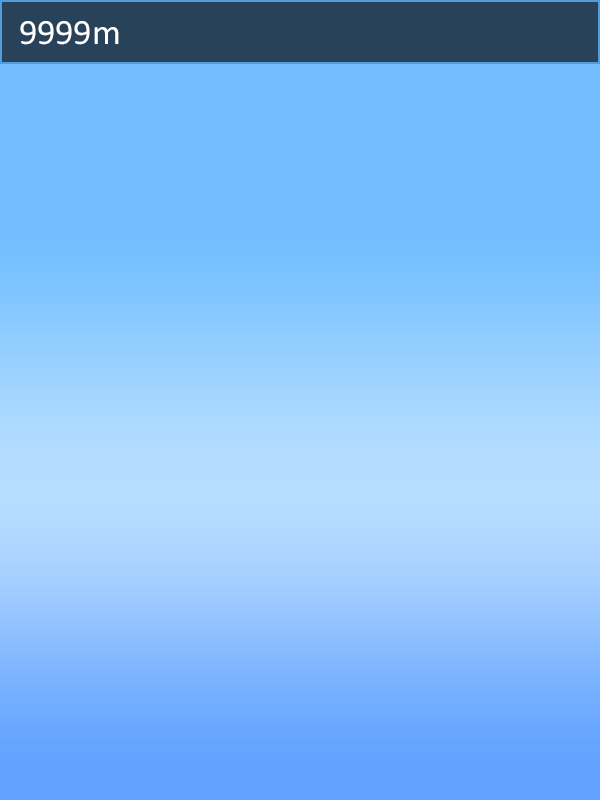
<style>
.page{position:relative;width:600px;height:800px;background:#72beff}
.page>*{position:absolute;margin:0}
.t1{font:36px "Calibri";color:#ffffff}
</style>
<div class="page">
<p class="t1" style="left:20px;top:21px;width:99px;height:24px">9999m</p>
</div>
